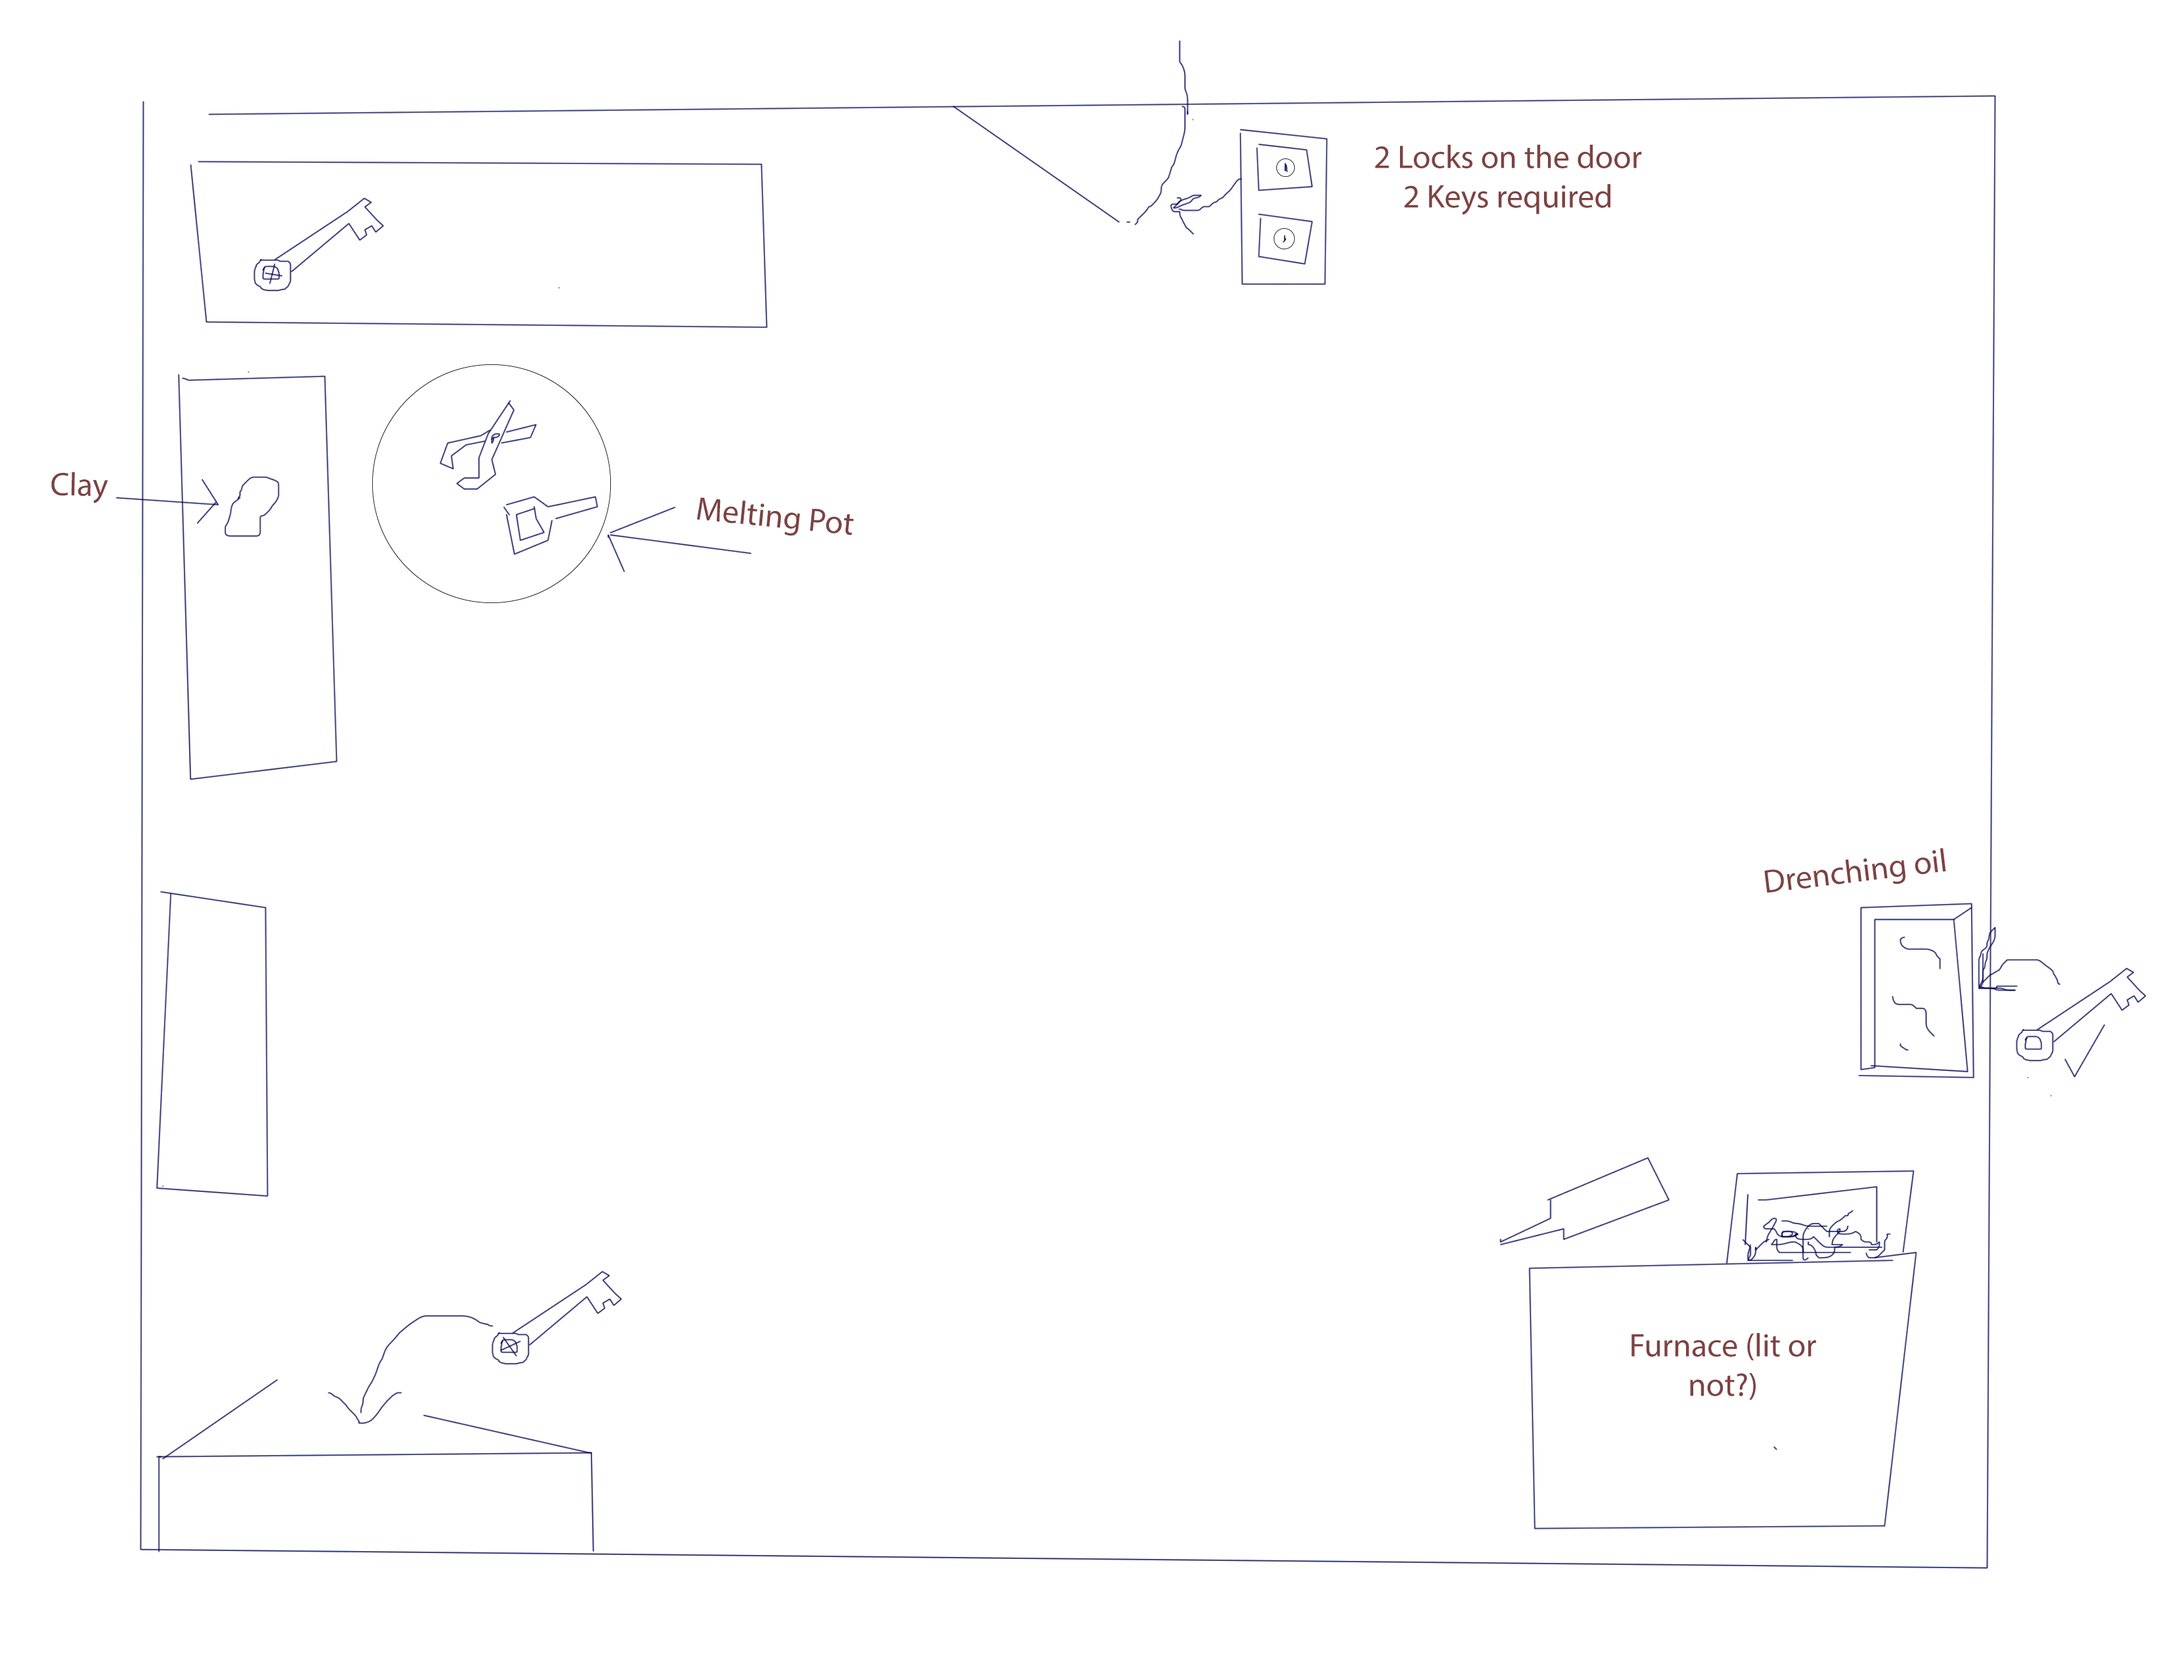
<style>
.page{position:relative;width:2170px;height:1677px;background:#ffffff}
.page>*{position:absolute;margin:0}
.t1{font:7.9px "MyriadPro-Regular";color:#7e4242}
</style>
<div class="page">
<p class="t1" style="left:1375px;top:145px;width:267px;height:70px;text-align:center">2 Locks on the door <br>2 Keys required</p>
<p class="t1" style="left:51px;top:471px;width:57px;height:32px;rotate:1deg">Clay</p>
<p class="t1" style="left:697px;top:497px;width:156px;height:39px;rotate:6deg">Melting Pot</p>
<p class="t1" style="left:1764px;top:848px;width:182px;height:45px;rotate:-7deg">Drenching oil</p>
<p class="t1" style="left:1631px;top:1333px;width:185px;height:67px;text-align:center">Furnace (lit or not?)<br>v</p>
</div>
